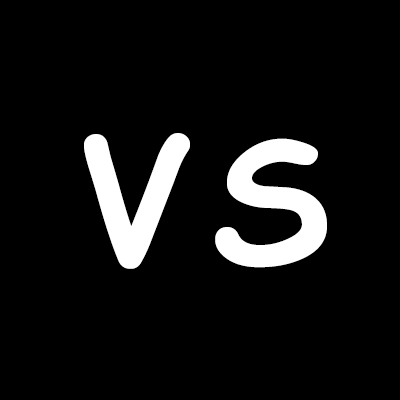
<style>
.page{position:relative;width:400px;height:400px;background:#000000}
.page>*{position:absolute;margin:0}
.t1{font:172px "ComicSansMS-Bold";letter-spacing:0.1em;color:#ffffff}
</style>
<div class="page">
<p class="t1" style="left:84px;top:133px;width:243px;height:136px">VS</p>
</div>
